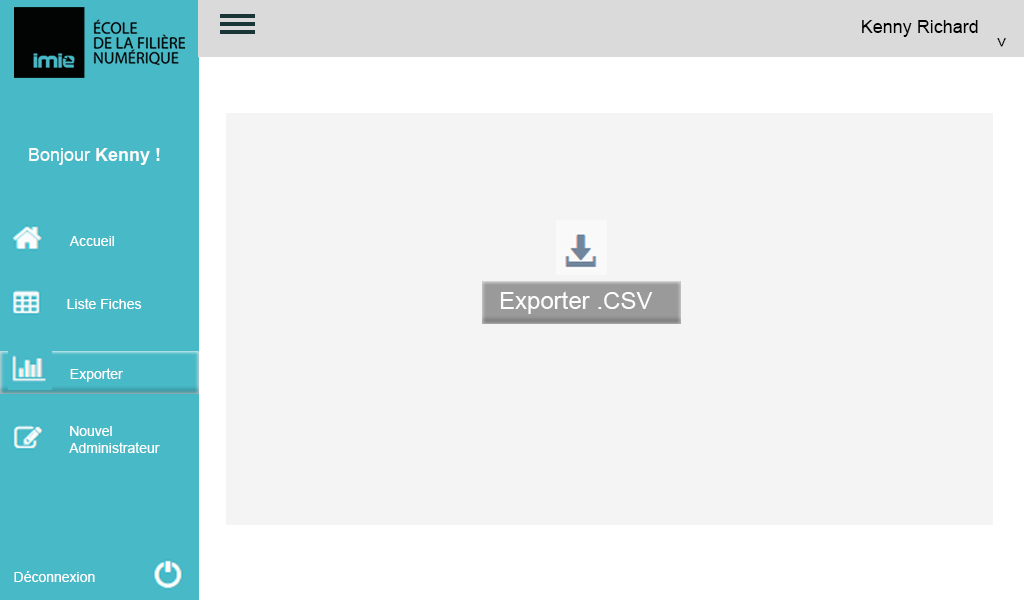
<style>
.page{position:relative;width:1024px;height:600px;background:#f4f4f4}
.page>*{position:absolute;margin:0}
.t1{font:18px "ArialMT";color:#010101}
.t2{font:18px "ArialMT";color:#fcfbfb}
.t3{font:18px "Arial-BoldMT";color:#fcfbfb}
.t4{font:14px "ArialMT";color:#fefefe}
.t5{font:24px "ArialMT";color:#fdfdfd}
</style>
<div class="page">
<p class="t1" style="left:862px;top:20px;width:116px;height:17px">Kenny Richard</p>
<p class="t1" style="left:997px;top:37px;width:9px;height:10px;rotate:90deg">&gt;</p>
<p class="t2" style="left:29px;top:148px;width:131px;height:17px">Bonjour<span class="t3"> Kenny !</span></p>
<p class="t4" style="left:69px;top:236px;width:45px;height:10px">Accueil</p>
<p class="t5" style="left:500px;top:291px;width:153px;height:23px">Exporter .CSV</p>
<p class="t4" style="left:67px;top:298px;width:75px;height:11px">Liste Fiches</p>
<p class="t4" style="left:70px;top:368px;width:53px;height:14px">Exporter</p>
<p class="t4" style="left:69px;top:426px;width:91px;height:27px">Nouvel<br>Administrateur</p>
<p class="t4" style="left:14px;top:571px;width:81px;height:11px">Déconnexion</p>
</div>
